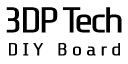
<style>
.page{position:relative;width:128px;height:64px;background:#ffffff}
.page>*{position:absolute;margin:0}
.t1{font:36px "ShareTech-Regular";letter-spacing:-0.1em;color:#000000;scale:1.22 1}
.t2{font:18px "ShareTech-Regular";letter-spacing:0.16em;color:#000000;scale:1.23 1}
</style>
<div class="page">
<p class="t1" style="left:6px;top:7px;width:116px;height:26px">3DP Tech</p>
<p class="t2" style="left:9px;top:43px;width:111px;height:13px">DIY Board</p>
</div>
